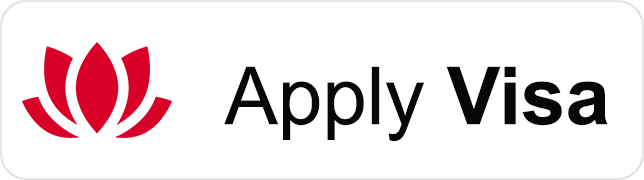
<style>
.page{position:relative;width:644px;height:180px;background:#ffffff}
.page>*{position:absolute;margin:0}
.t1{font:80px "ArialMT";color:#070707}
.t2{font:80px "Arial-BoldMT";color:#070707}
</style>
<div class="page">
<p class="t1" style="left:224px;top:66px;width:384px;height:75px">Apply <span class="t2">Visa</span></p>
</div>
